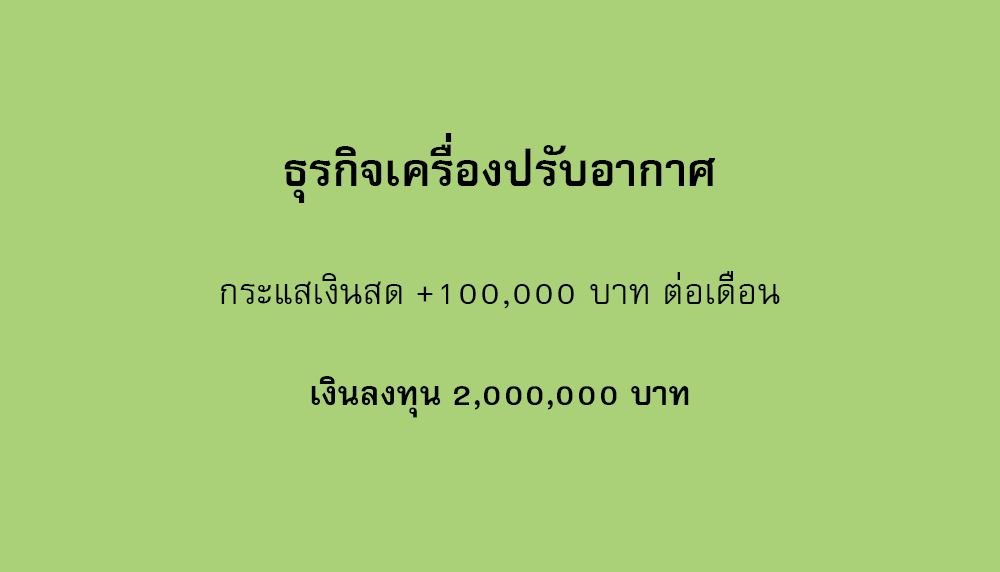
<style>
.page{position:relative;width:1000px;height:572px;background:#aad178}
.page>*{position:absolute;margin:0}
.t1{font:64px "FreesiaUPCBold";color:#000000}
.t2{font:50px "FreesiaUPC";color:#000000}
.t3{font:47px "FreesiaUPCBold";color:#000000}
</style>
<div class="page">
<p class="t1" style="left:284px;top:133px;width:432px;height:70px">ธุรกิจเครื่องปรับอากาศ</p>
<p class="t2" style="left:221px;top:271px;width:559px;height:38px">กระแสเงินสด +100,000 บาท ต่อเดือน</p>
<p class="t3" style="left:311px;top:376px;width:378px;height:42px">เงินลงทุน 2,000,000 บาท</p>
</div>
